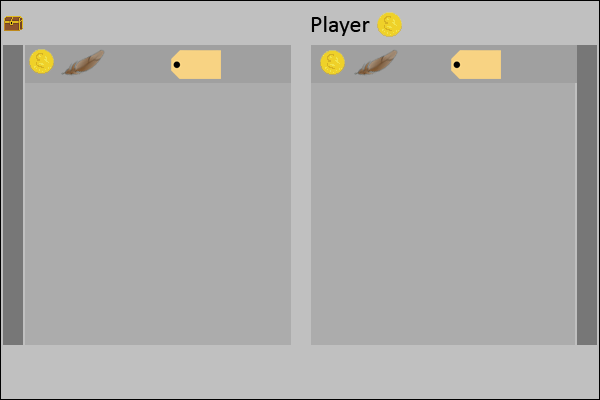
<style>
.page{position:relative;width:600px;height:400px;background:#acacac}
.page>*{position:absolute;margin:0}
.t1{font:24px "Calibri";color:#000000}
</style>
<div class="page">
<p class="t1" style="left:311px;top:16px;width:59px;height:20px">Player</p>
</div>
